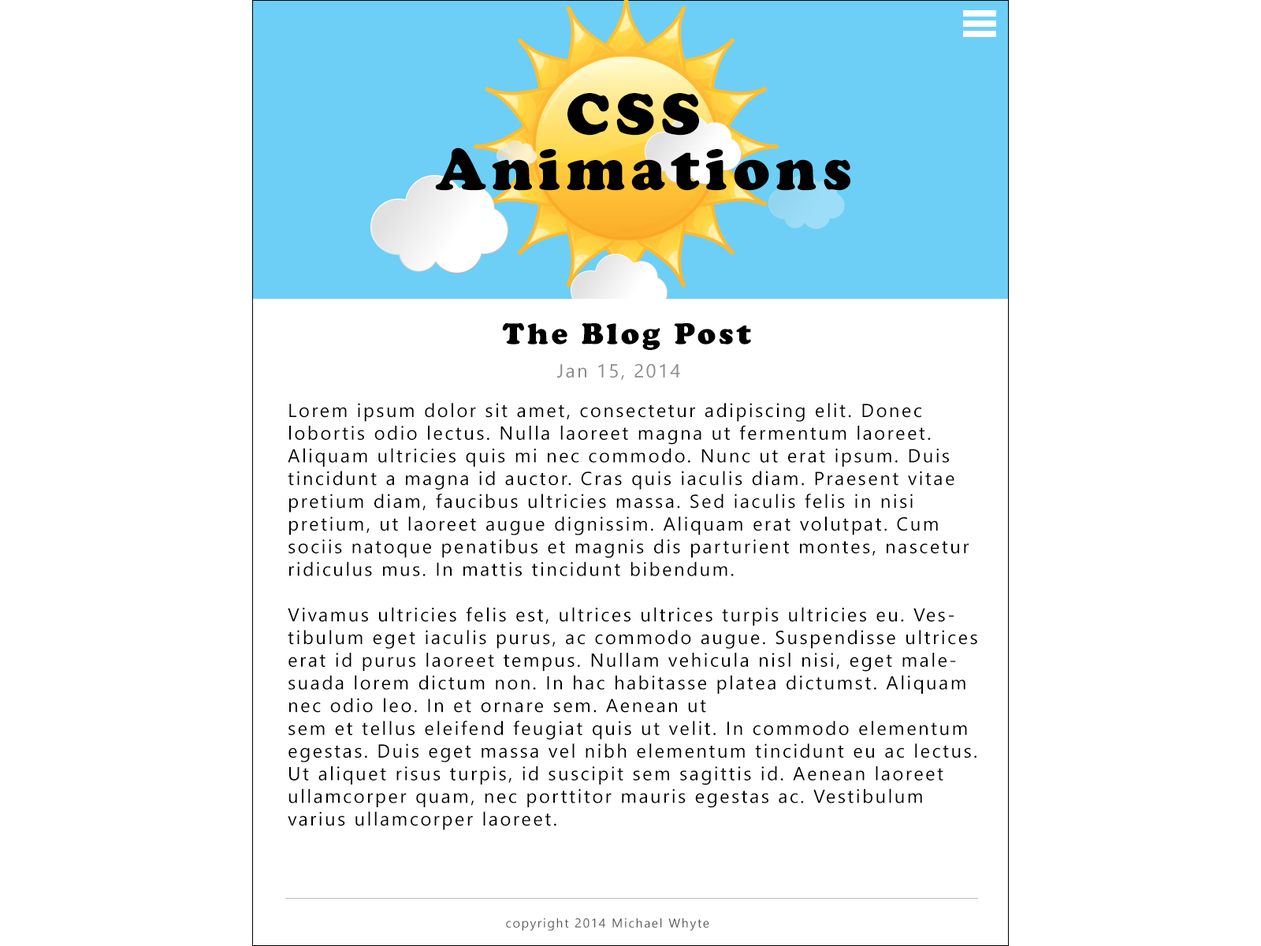
<style>
.page{position:relative;width:1261px;height:946px;background:#ffffff}
.page>*{position:absolute;margin:0}
.t1{font:60.7px/55.2px "CooperBlack";letter-spacing:0.1em;color:#000000}
.t2{font:30.7px "CooperBlack";letter-spacing:0.1em;color:#000000}
.t3{font:18.9px "NirmalaUI";letter-spacing:0.1em;color:#8a8a8a}
.t4{font:18.9px "NirmalaUI";letter-spacing:0.1em;color:#000000}
.t5{font:12.6px "NirmalaUI";letter-spacing:0.1em;color:#525252}
</style>
<div class="page">
<p class="t1" style="left:435px;top:93px;width:415px;height:98px;text-align:center">CSS <br>Animations</p>
<p class="t2" style="left:502px;top:322px;width:249px;height:28px">The Blog Post</p>
<p class="t3" style="left:557px;top:363px;width:123px;height:17px">Jan 15, 2014</p>
<p class="t4" style="left:288px;top:403px;width:689px;height:427px">Lorem ipsum dolor sit amet, consectetur adipiscing elit. Donec lobortis odio lectus. Nulla laoreet magna ut fermentum laoreet. Aliquam ultricies quis mi nec commodo. Nunc ut erat ipsum. Duis tincidunt a magna id auctor. Cras quis iaculis diam. Praesent vitae pretium diam, faucibus ultricies massa. Sed iaculis felis in nisi pretium, ut laoreet augue dignissim. Aliquam erat volutpat. Cum sociis natoque penatibus et magnis dis parturient montes, nascetur ridiculus mus. In mattis tincidunt bibendum.<br><br>Vivamus ultricies felis est, ultrices ultrices turpis ultricies eu. Vestibulum eget iaculis purus, ac commodo augue. Suspendisse ultrices erat id purus laoreet tempus. Nullam vehicula nisl nisi, eget malesuada lorem dictum non. In hac habitasse platea dictumst. Aliquam nec odio leo. In et ornare sem. Aenean ut <br>sem et tellus eleifend feugiat quis ut velit. In commodo elementum egestas. Duis eget massa vel nibh elementum tincidunt eu ac lectus. Ut aliquet risus turpis, id suscipit sem sagittis id. Aenean laoreet ullamcorper quam, nec porttitor mauris egestas ac. Vestibulum varius ullamcorper laoreet.<br><br>Praesent convallis, arcu non porttitor gravida, lorem est fermentum diam, in iaculis libero mauris sit amet augue. Phasellus eget ante id odio hendrerit malesuada. Etiam ut sem ac odio sodales porttitor. Phasellus non libero a dui gravida molestie sit amet ut purus. Suspendisse quis diam in tortor dignissim ornare. Sed iaculis diam nisl, congue venenatis massa volutpat sit amet. Mauris porttitor mauris mauris, vel imperdiet sem tincidunt non. Quisque vel est interdum, tempus massa nec, tincidunt urna. Vestibulum nec odio sapien. Ut at lacus malesuada, cursus leo scelerisque, aliquet magna.</p>
<p class="t5" style="left:506px;top:917px;width:203px;height:14px">copyright 2014 Michael Whyte</p>
</div>
